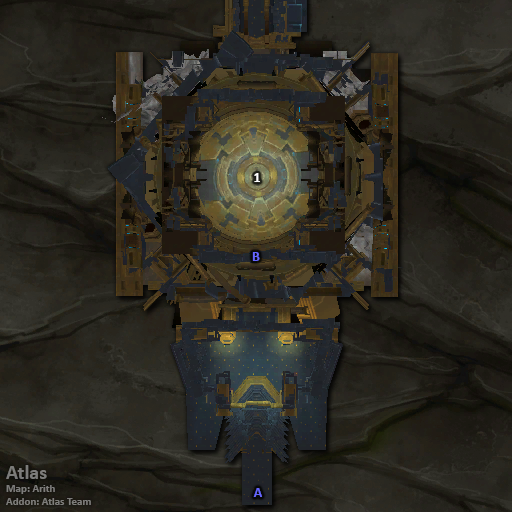
<style>
.page{position:relative;width:512px;height:512px}
.page>*{position:absolute;margin:0}
.t1{font:14px "Calibri-Bold";color:#ffffff}
.t2{font:14px "Calibri-Bold";color:#6666ff}
.t3{font:11px "Calibri-Bold";color:#7d7c7a}
.t4{font:20px "Calibri-Bold";color:#7d7c7a}
</style>
<div class="page">
<p class="t1" style="left:254px;top:173px;width:6px;height:9px">1</p>
<p class="t2" style="left:252px;top:252px;width:8px;height:9px">B</p>
<p class="t3" style="left:6px;top:465px;width:85px;height:40px"><span class="t4">Atlas<br></span>Map: Arith<br>Addon: Atlas Team</p>
<p class="t2" style="left:253px;top:488px;width:9px;height:9px">A</p>
</div>
